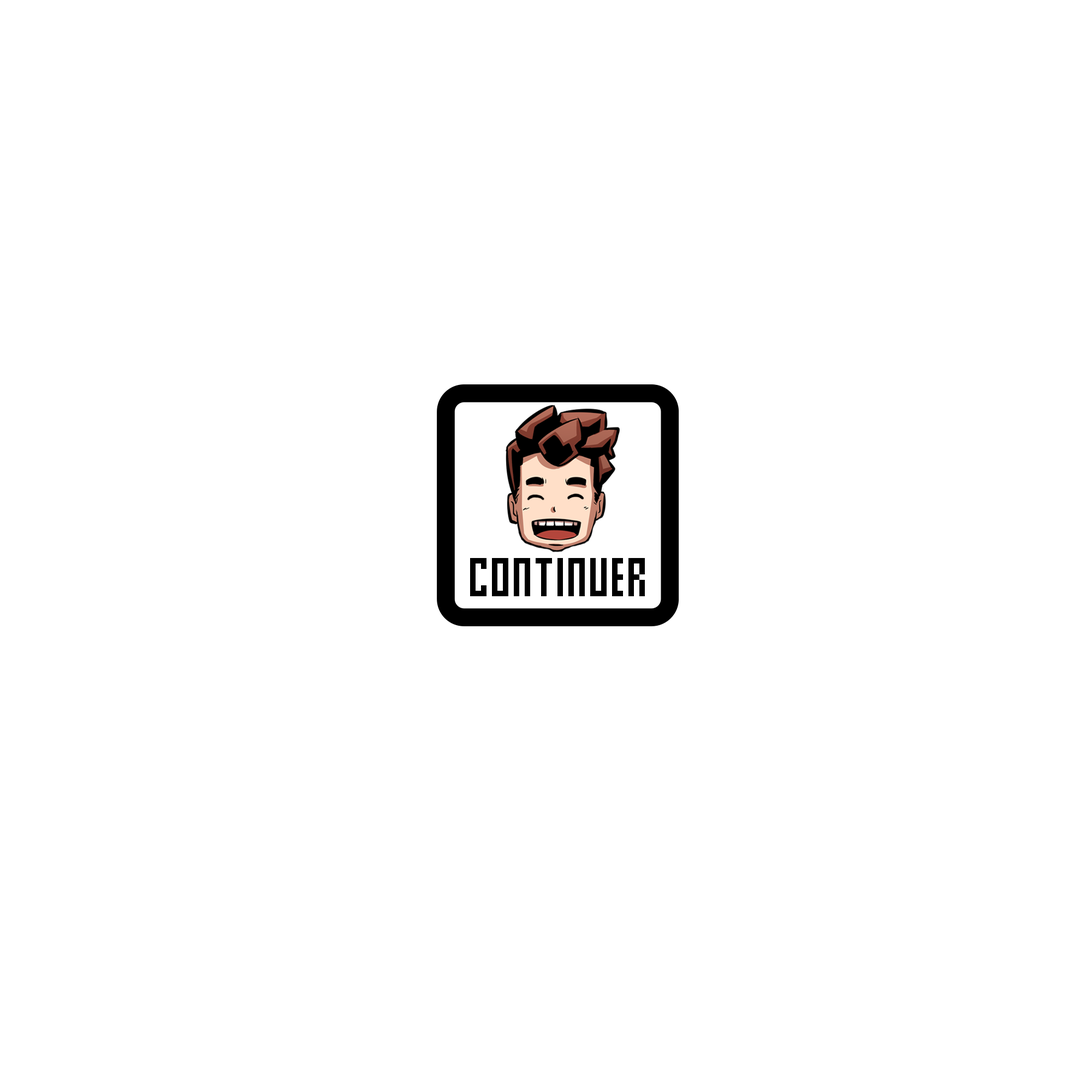
<style>
.page{position:relative;width:1092px;height:1092px;background:#ffffff}
.page>*{position:absolute;margin:0}
.t1{font:54.6px "pxl";color:#000000}
</style>
<div class="page">
<p class="t1" style="left:470px;top:558px;width:175px;height:38px">CONTINUER</p>
</div>
